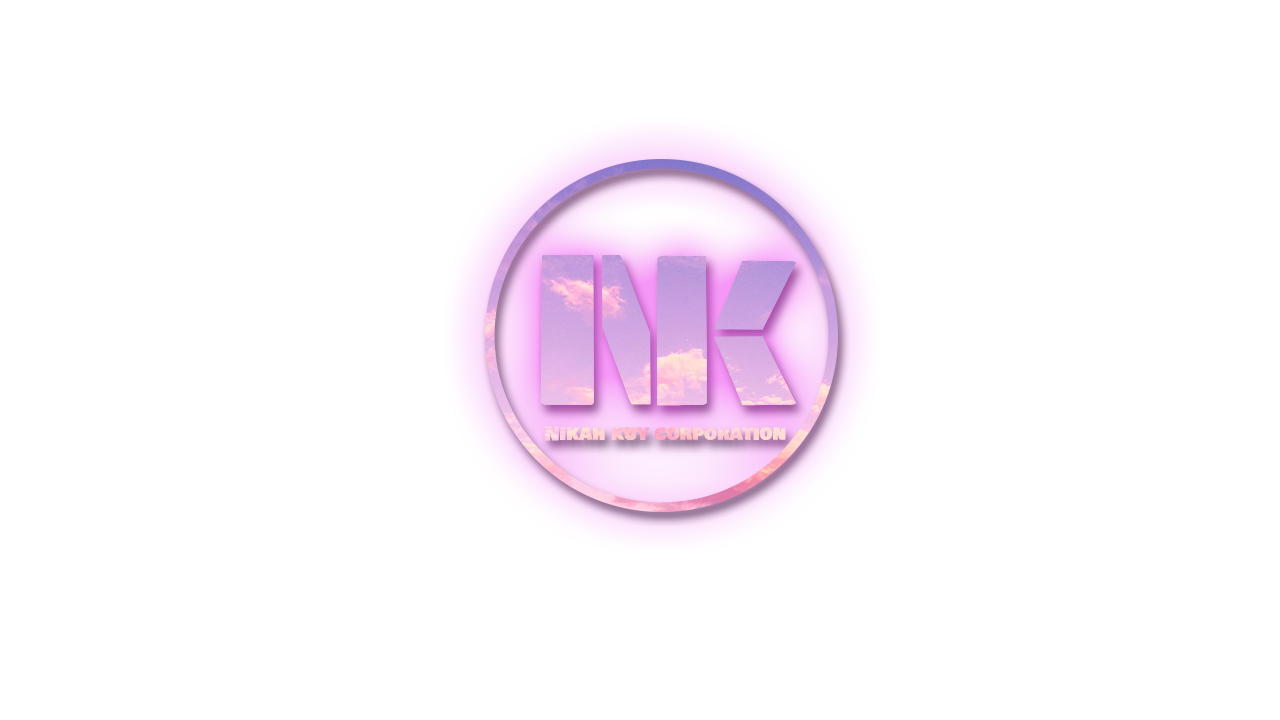
<style>
.page{position:relative;width:1280px;height:720px;background:#ffffff}
.page>*{position:absolute;margin:0}
.t1{font:18.5px "BowlbyOneSC-Regular";color:#fecfd2}
</style>
<div class="page">
<p class="t1" style="left:544px;top:426px;width:242px;height:15px">Nikah kuy corporation</p>
</div>
